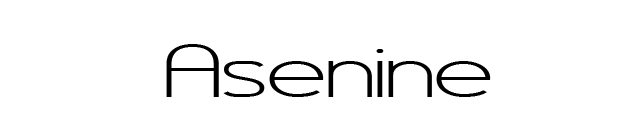
<style>
.page{position:relative;width:640px;height:137px;background:#ffffff}
.page>*{position:absolute;margin:0}
.t1{font:90px "AsenineWide";color:#000000}
</style>
<div class="page">
<p class="t1" style="left:166px;top:44px;width:325px;height:53px">Asenine</p>
</div>
